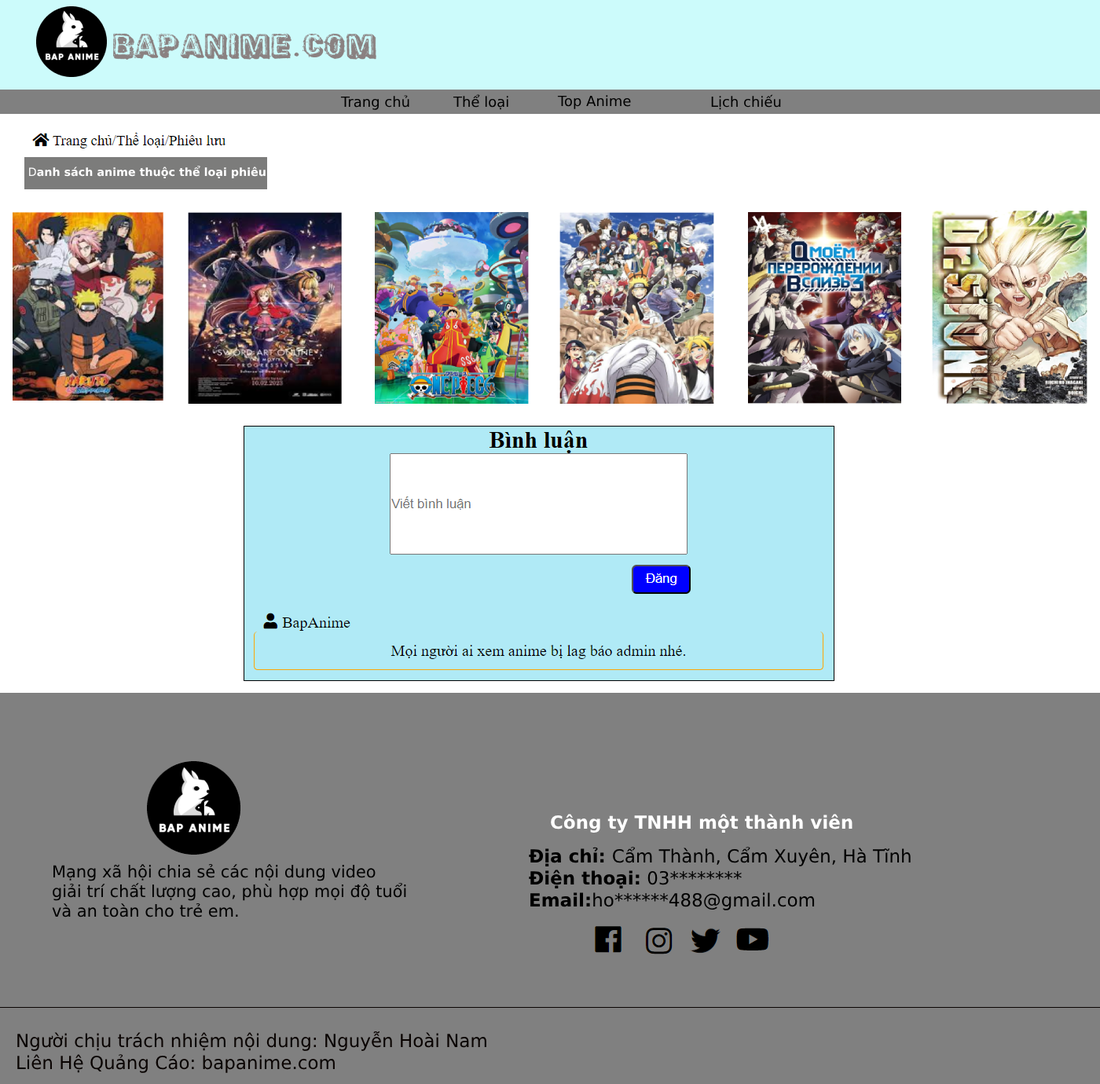
<style>
.page{position:relative;width:1100px;height:1084px;background:#808080}
.page>*{position:absolute;margin:0}
.t1{font:14.1px "DejaVuSans";color:#000000}
.t2{font:11.2px "DejaVuSans-Bold";color:#ffffff}
.t3{font:11.2px "DejaVuSans";color:#ffffff}
.t4{font:18.1px "DejaVuSans-Bold";color:#ffffff}
.t5{font:18.1px "DejaVuSans";color:#000000}
.t6{font:18.1px "DejaVuSans-Bold";color:#090301}
.t7{font:18.1px "DejaVuSans-Bold";color:#000000}
.t8{font:16.4px "DejaVuSans";color:#000000}
.t9{font:18.1px "DejaVuSans";color:#090301}
</style>
<div class="page">
<p class="t1" style="left:340px;top:95px;width:69px;height:15px">Trang chủ</p>
<p class="t1" style="left:453px;top:94px;width:55px;height:16px">Thể loại</p>
<p class="t1" style="left:557px;top:95px;width:74px;height:14px">Top Anime</p>
<p class="t1" style="left:711px;top:94px;width:70px;height:16px">Lịch chiếu</p>
<p class="t2" style="left:29px;top:165px;width:259px;height:14px"><span class="t3">D</span>anh sách anime thuộc thể loại phiêu lư<span class="t3">u</span></p>
<p class="t4" style="left:551px;top:814px;width:301px;height:19px">Công ty TNHH một thành viên</p>
<p class="t5" style="left:529px;top:847px;width:382px;height:64px"><span class="t6">Địa chỉ: </span>Cẩm Thành, Cẩm Xuyên, Hà Tĩnh<span class="t7"><br>Điện thoại:</span> 03********<span class="t7"><br>Email:</span>ho******488@gmail.com</p>
<p class="t8" style="left:52px;top:864px;width:354px;height:54px">Mạng xã hội chia sẻ các nội dung video giải trí chất lượng cao, phù hợp mọi độ tuổi và an toàn cho trẻ em.</p>
<p class="t9" style="left:17px;top:1031px;width:469px;height:42px">Người chịu trách nhiệm nội dung: Nguyễn Hoài Nam<br>Liên Hệ Quảng Cáo: bapanime.com</p>
</div>
